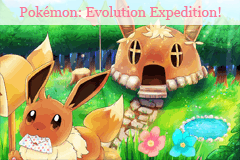
<style>
.page{position:relative;width:240px;height:160px}
.page>*{position:absolute;margin:0}
.t1{font:14px "Georgia";color:#f97998}
</style>
<div class="page">
<p class="t1" style="left:19px;top:6px;width:202px;height:14px">Pokémon: Evolution Expedition!</p>
</div>
